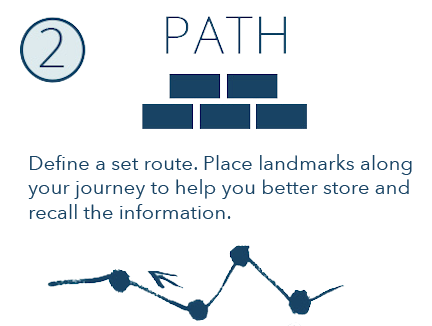
<style>
.page{position:relative;width:432px;height:326px;background:#ffffff}
.page>*{position:absolute;margin:0}
.t1{font:20.5px "AvenirNext-Regular";color:#184364}
</style>
<div class="page">
<p class="t1" style="left:28px;top:154px;width:384px;height:65px">Define a set route. Place landmarks along<br>your journey to help you better store and<br>recall the information.</p>
</div>
